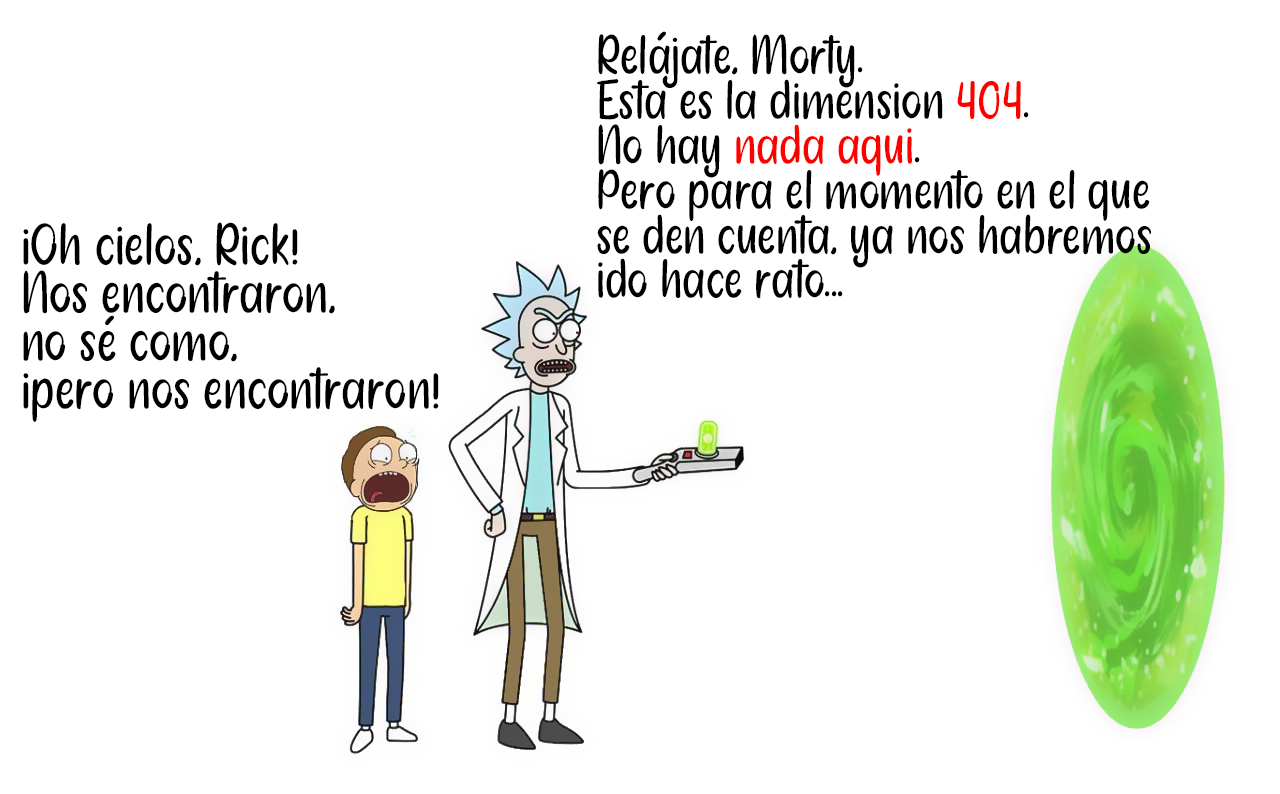
<style>
.page{position:relative;width:1280px;height:794px;background:#ffffff}
.page>*{position:absolute;margin:0}
.t1{font:59.2px/44.8px "HandmadeRegular";color:#000000}
.t2{font:59.2px/44.8px "HandmadeRegular";color:#ff0000}
.t3{font:63.4px/48px "HandmadeRegular";color:#000000}
</style>
<div class="page">
<p class="t1" style="left:597px;top:34px;width:554px;height:265px">Relajate, Morty.<br>Esta es la dimensión <span class="t2">404</span>.<br>No hay <span class="t2">nada aquí</span>.<br>Pero para el momento en el que<br>se den cuenta, ya nos habremos<br>ido hace rato...</p>
<p class="t3" style="left:23px;top:222px;width:416px;height:200px">¡Oh cielos, Rick!<br>Nos encontraron,<br>no sé como,<br>¡pero nos encontraron!</p>
</div>
